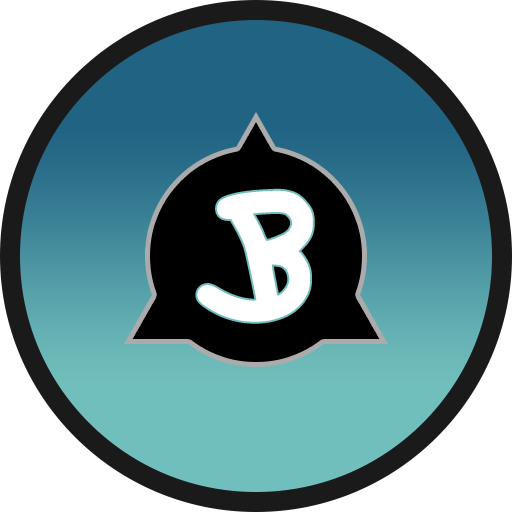
<style>
.page{position:relative;width:512px;height:512px;background:#ffffff}
.page>*{position:absolute;margin:0}
.t1{font:203.2px "Brutal_bounce-Regular";color:#ffffff}
</style>
<div class="page">
<p class="t1" style="left:197px;top:190px;width:116px;height:132px">B</p>
</div>
